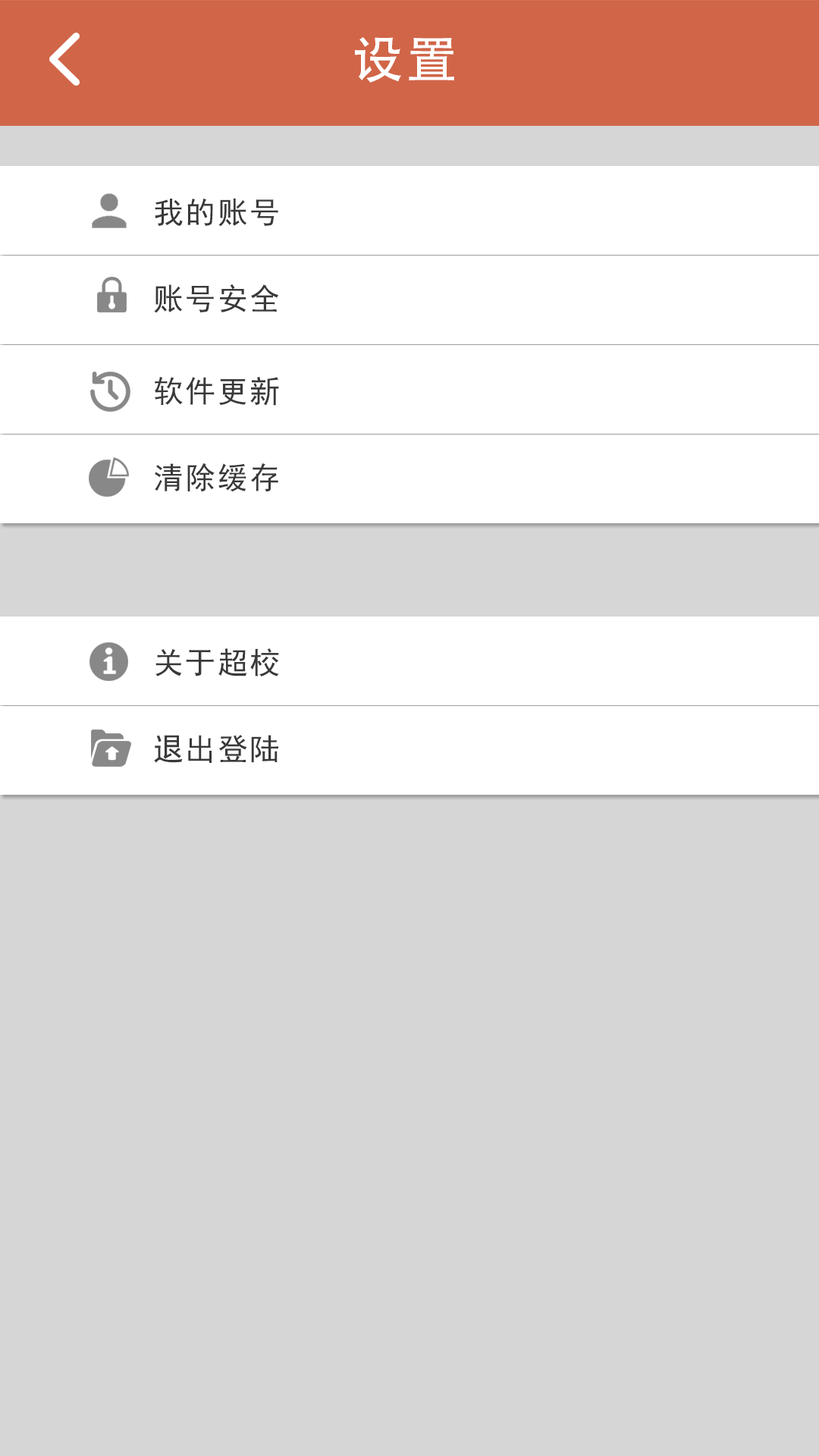
<style>
.page{position:relative;width:819px;height:1456px;background:#d6d6d6}
.page>*{position:absolute;margin:0}
.t1{font:50.8px "AdobeHeitiStd-Regular";letter-spacing:0.06em;color:#ffffff}
.t2{font:30.3px "SimHei";letter-spacing:0.06em;color:#393939}
.t3{font:30.6px "SimHei";letter-spacing:0.06em;color:#393939}
</style>
<div class="page">
<p class="t1" style="left:355px;top:37px;width:99px;height:46px">设置</p>
<p class="t2" style="left:155px;top:198px;width:123px;height:29px">我的账号</p>
<p class="t3" style="left:154px;top:284px;width:125px;height:29px">账号安全</p>
<p class="t3" style="left:155px;top:376px;width:124px;height:30px">软件更新</p>
<p class="t3" style="left:155px;top:463px;width:123px;height:29px">清除缓存</p>
<p class="t3" style="left:155px;top:648px;width:124px;height:28px">关于超校</p>
<p class="t3" style="left:154px;top:735px;width:124px;height:28px">退出登陆</p>
</div>
